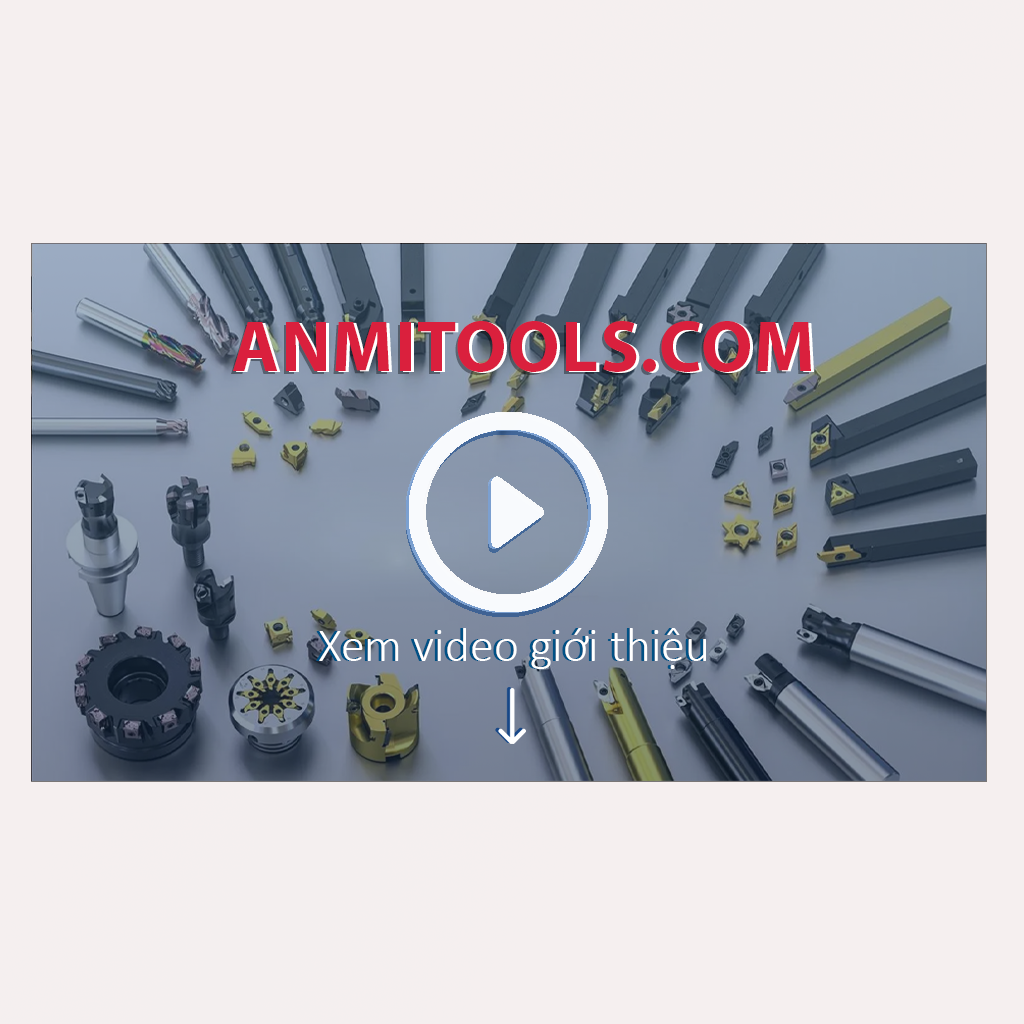
<style>
.page{position:relative;width:1024px;height:1024px;background:#f5efef}
.page>*{position:absolute;margin:0}
.t1{font:72px "MyriadPro-Bold";color:#da203d;text-transform:uppercase}
.t2{font:48px "Calibri-Light";color:#005185}
.t3{font:48px "Calibri-Light";color:#ffffff}
</style>
<div class="page">
<p class="t1" style="left:231px;top:324px;width:578px;height:51px">ANMITOOLS.COM</p>
<p class="t1" style="left:233px;top:321px;width:578px;height:51px">ANMITOOLS.COM</p>
<p class="t1" style="left:236px;top:322px;width:578px;height:51px">ANMITOOLS.COM</p>
<p class="t2" style="left:316px;top:628px;width:387px;height:41px">Xem video giới thiệu</p>
<p class="t3" style="left:319px;top:628px;width:387px;height:41px">Xem video giới thiệu</p>
</div>
